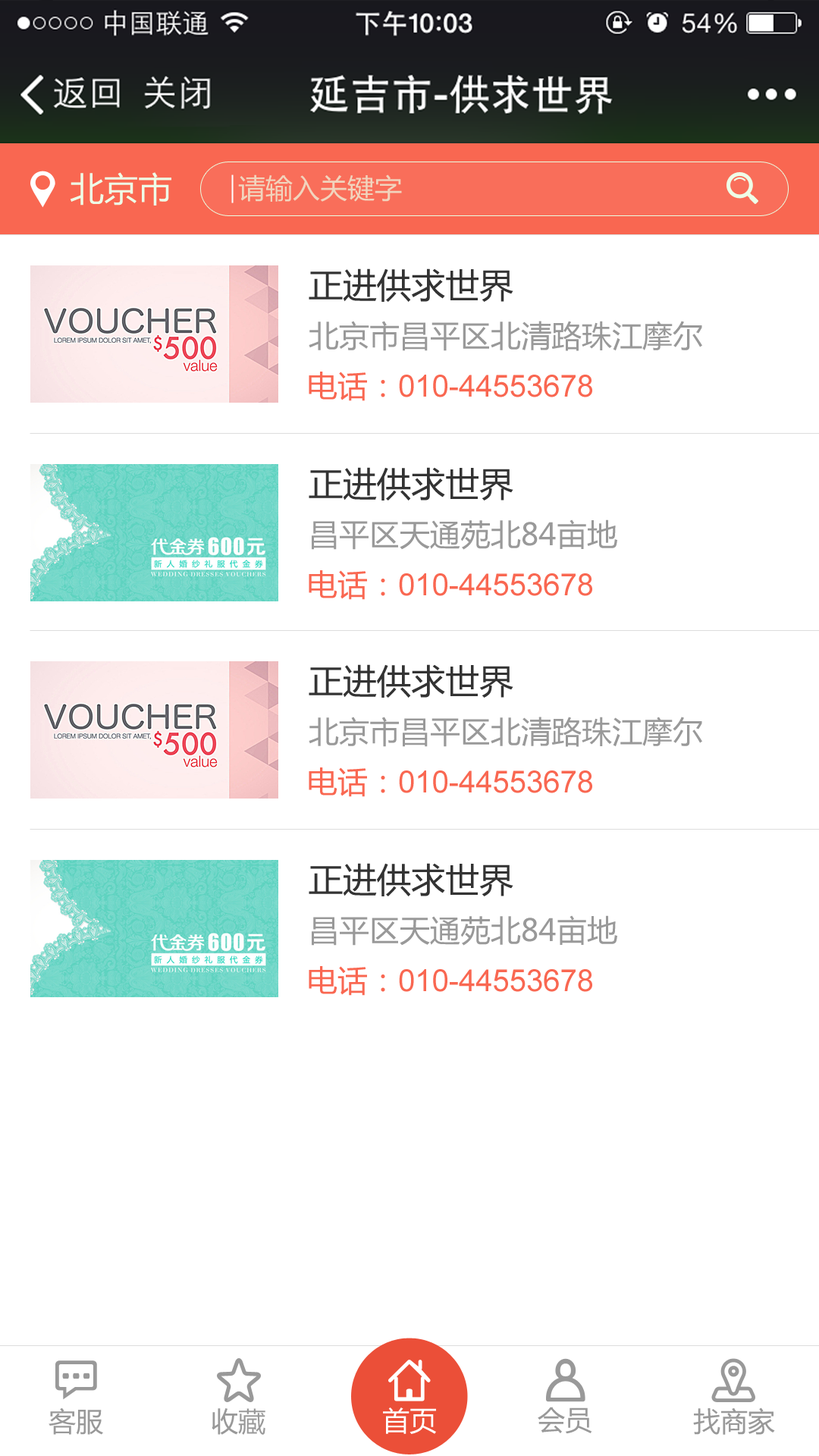
<style>
.page{position:relative;width:819px;height:1456px;background:#ffffff}
.page>*{position:absolute;margin:0}
.t1{font:34.1px "MicrosoftYaHei";color:#eeffe7;text-transform:uppercase}
.t2{font:27.3px "MicrosoftYaHei";color:#f1d4bd;text-transform:uppercase}
.t3{font:34.1px "MicrosoftYaHei";color:#333333}
.t4{font:30.3px "MicrosoftYaHei";color:#999999}
.t5{font:30.3px "ArialMT";color:#f96751}
.t6{font:30.3px "MicrosoftYaHei";color:#f96751}
.t7{font:27.3px "MicrosoftYaHei";color:#999999}
.t8{font:27.3px "MicrosoftYaHei";color:#ffffff}
</style>
<div class="page">
<p class="t1" style="left:70px;top:172px;width:101px;height:34px">北京市</p>
<p class="t2" style="left:238px;top:174px;width:164px;height:28px">请输入关键字</p>
<p class="t3" style="left:309px;top:268px;width:204px;height:34px">正进供求世界</p>
<p class="t4" style="left:309px;top:321px;width:393px;height:30px">北京市昌平区北清路珠江摩尔</p>
<p class="t5" style="left:309px;top:372px;width:283px;height:29px"><span class="t6">电话：</span>010-44553678</p>
<p class="t3" style="left:309px;top:467px;width:204px;height:33px">正进供求世界</p>
<p class="t4" style="left:312px;top:519px;width:305px;height:31px">昌平区天通苑北84亩地</p>
<p class="t5" style="left:309px;top:570px;width:283px;height:30px"><span class="t6">电话：</span>010-44553678</p>
<p class="t3" style="left:309px;top:664px;width:204px;height:34px">正进供求世界</p>
<p class="t4" style="left:309px;top:717px;width:393px;height:30px">北京市昌平区北清路珠江摩尔</p>
<p class="t5" style="left:309px;top:767px;width:283px;height:30px"><span class="t6">电话：</span>010-44553678</p>
<p class="t3" style="left:309px;top:863px;width:204px;height:33px">正进供求世界</p>
<p class="t4" style="left:312px;top:915px;width:305px;height:31px">昌平区天通苑北84亩地</p>
<p class="t5" style="left:309px;top:966px;width:283px;height:30px"><span class="t6">电话：</span>010-44553678</p>
<p class="t7" style="left:49px;top:1407px;width:54px;height:28px">客服</p>
<p class="t7" style="left:212px;top:1408px;width:53px;height:27px">收藏</p>
<p class="t8" style="left:383px;top:1407px;width:53px;height:27px">首页</p>
<p class="t7" style="left:538px;top:1407px;width:54px;height:27px">会员</p>
<p class="t7" style="left:693px;top:1407px;width:82px;height:28px">找商家</p>
</div>
